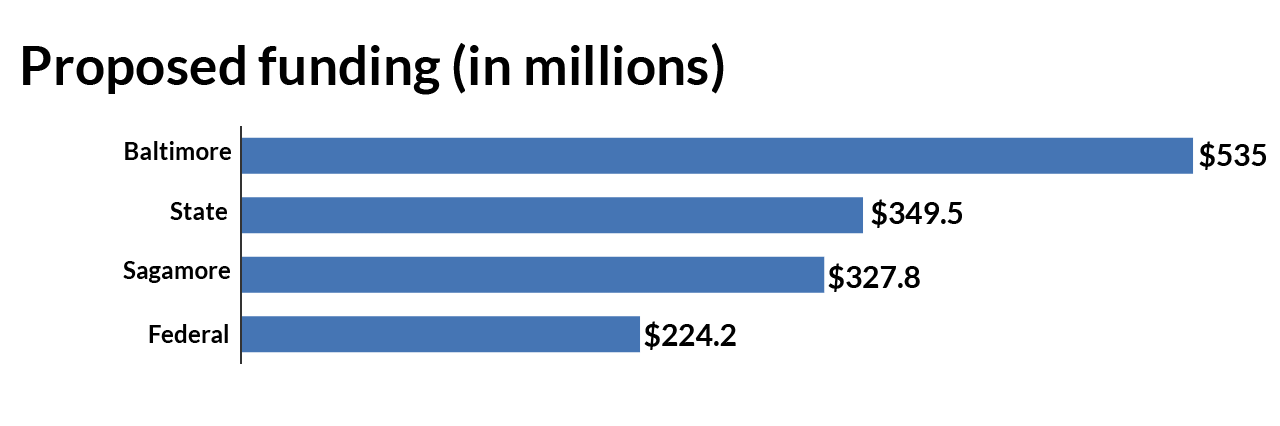
<style>
.page{position:relative;width:1280px;height:426px;background:#ffffff}
.page>*{position:absolute;margin:0}
.t1{font:24.3px "Lato-Bold";color:#000000}
.t2{font:30px "Lato-Bold";color:#000000}
</style>
<div class="page">
<p class="t1" style="left:125px;top:141px;width:106px;height:19px">Baltimore</p>
<p class="t2" style="left:1199px;top:141px;width:67px;height:29px">$535</p>
<p class="t1" style="left:170px;top:202px;width:57px;height:18px">State</p>
<p class="t2" style="left:871px;top:199px;width:91px;height:29px">$349.5</p>
<p class="t1" style="left:123px;top:261px;width:107px;height:22px">Sagamore</p>
<p class="t2" style="left:828px;top:263px;width:92px;height:29px">$327.8</p>
<p class="t1" style="left:149px;top:324px;width:79px;height:19px">Federal</p>
<p class="t2" style="left:644px;top:321px;width:92px;height:29px">$224.2</p>
</div>
